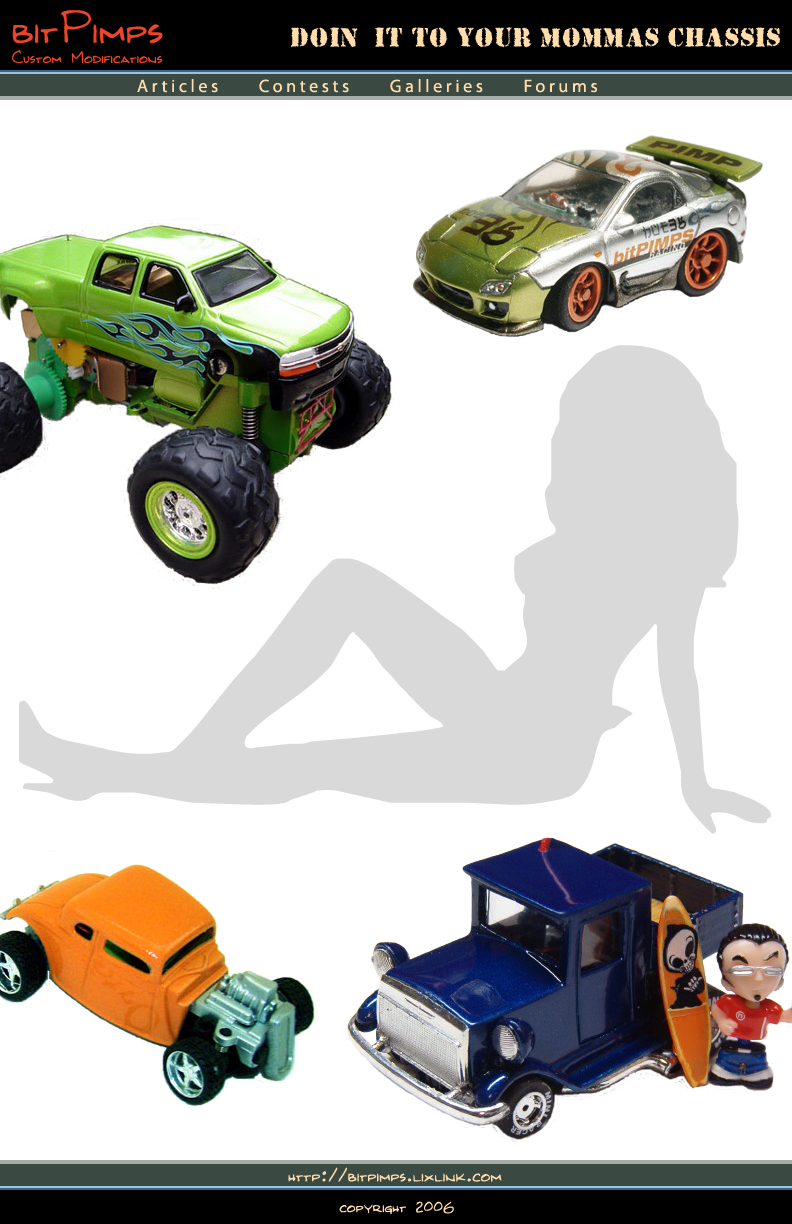
<style>
.page{position:relative;width:792px;height:1224px;background:#ffffff}
.page>*{position:absolute;margin:0}
.t1{font:48px "Kilroy-WasHere";color:#ef4427}
.t2{font:24px "Due-Date-Regular";color:#ffddab}
.t3{font:18px "Kilroy-WasHere";color:#ef4427}
.t4{font:18px "MyriadPro-Regular";letter-spacing:0.2em;color:#ffddab}
.t5{font:20px "Kilroy-WasHere";color:#ffddab}
.t6{font:18px "Kilroy-WasHere";color:#ffddab}
</style>
<div class="page">
<p class="t1" style="left:12px;top:10px;width:151px;height:34px">bitPimps</p>
<p class="t2" style="left:291px;top:27px;width:489px;height:21px">Doin' It To Your Mommas Chassis</p>
<p class="t3" style="left:12px;top:50px;width:151px;height:14px">Custom Modifications</p>
<p class="t4" style="left:137px;top:79px;width:460px;height:14px">Articles     Contests     Galleries     Forums</p>
<p class="t5" style="left:288px;top:1167px;width:214px;height:15px">http://bitpimps.lixlink.com</p>
<p class="t6" style="left:339px;top:1201px;width:115px;height:14px">copyright 2006</p>
</div>
